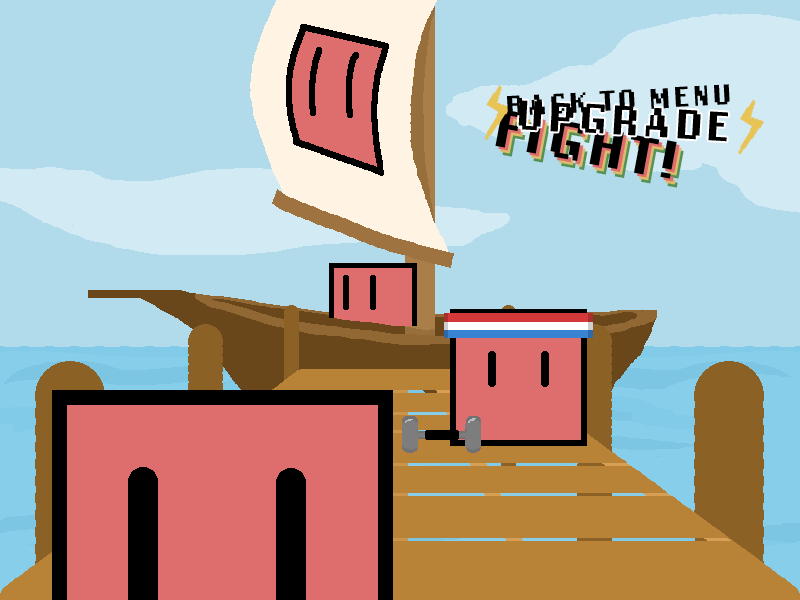
<style>
.page{position:relative;width:800px;height:600px;background:#b1daeb}
.page>*{position:absolute;margin:0}
.t1{font:29.9px "LoRes12OT-Bold";letter-spacing:0.07em;color:#000000}
.t2{font:43.1px "LoRes12OT-Bold";letter-spacing:0.07em;color:#000000}
.t3{font:55.7px "LoRes12OT-Bold";letter-spacing:0.07em;color:#000000}
.t4{font:55.7px "LoRes12OT-Bold";letter-spacing:0.07em}
</style>
<div class="page">
<p class="t1" style="left:507px;top:84px;width:223px;height:32px;rotate:-3deg">BACK TO MENU</p>
<p class="t2" style="left:518px;top:100px;width:210px;height:42px;rotate:3deg">UPGRADE</p>
<p class="t3" style="left:495px;top:109px;width:182px;height:70px;rotate:11deg">FIGHT!</p>
<p class="t4" style="left:498px;top:112px;width:182px;height:70px;rotate:11deg">FIGHT!</p>
<p class="t4" style="left:500px;top:115px;width:182px;height:70px;rotate:11deg">FIGHT!</p>
</div>
